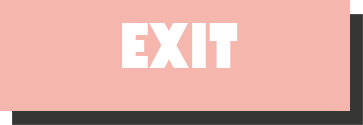
<style>
.page{position:relative;width:363px;height:125px;background:#f5b6ae}
.page>*{position:absolute;margin:0}
.t1{font:61.4px "GillSans-UltraBoldCondensed";color:#ffffff}
</style>
<div class="page">
<p class="t1" style="left:122px;top:23px;width:116px;height:45px">EXIT</p>
</div>
